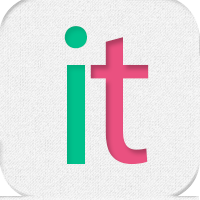
<style>
.page{position:relative;width:200px;height:200px}
.page>*{position:absolute;margin:0}
.t1{font:205px "MyriadPro-Regular";color:#00c08b}
.t2{font:200px "MyriadPro-Regular";color:#e8507f}
</style>
<div class="page">
<p class="t1" style="left:64px;top:26px;width:23px;height:138px">i</p>
<p class="t2" style="left:90px;top:37px;width:59px;height:128px">t</p>
</div>
